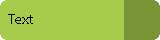
<style>
.page{position:relative;width:160px;height:40px;background:#a7cb4a}
.page>*{position:absolute;margin:0}
.t1{font:14.5px "MyriadPro-Regular";color:#000000}
</style>
<div class="page">
<p class="t1" style="left:8px;top:14px;width:25px;height:10px">Text</p>
</div>
